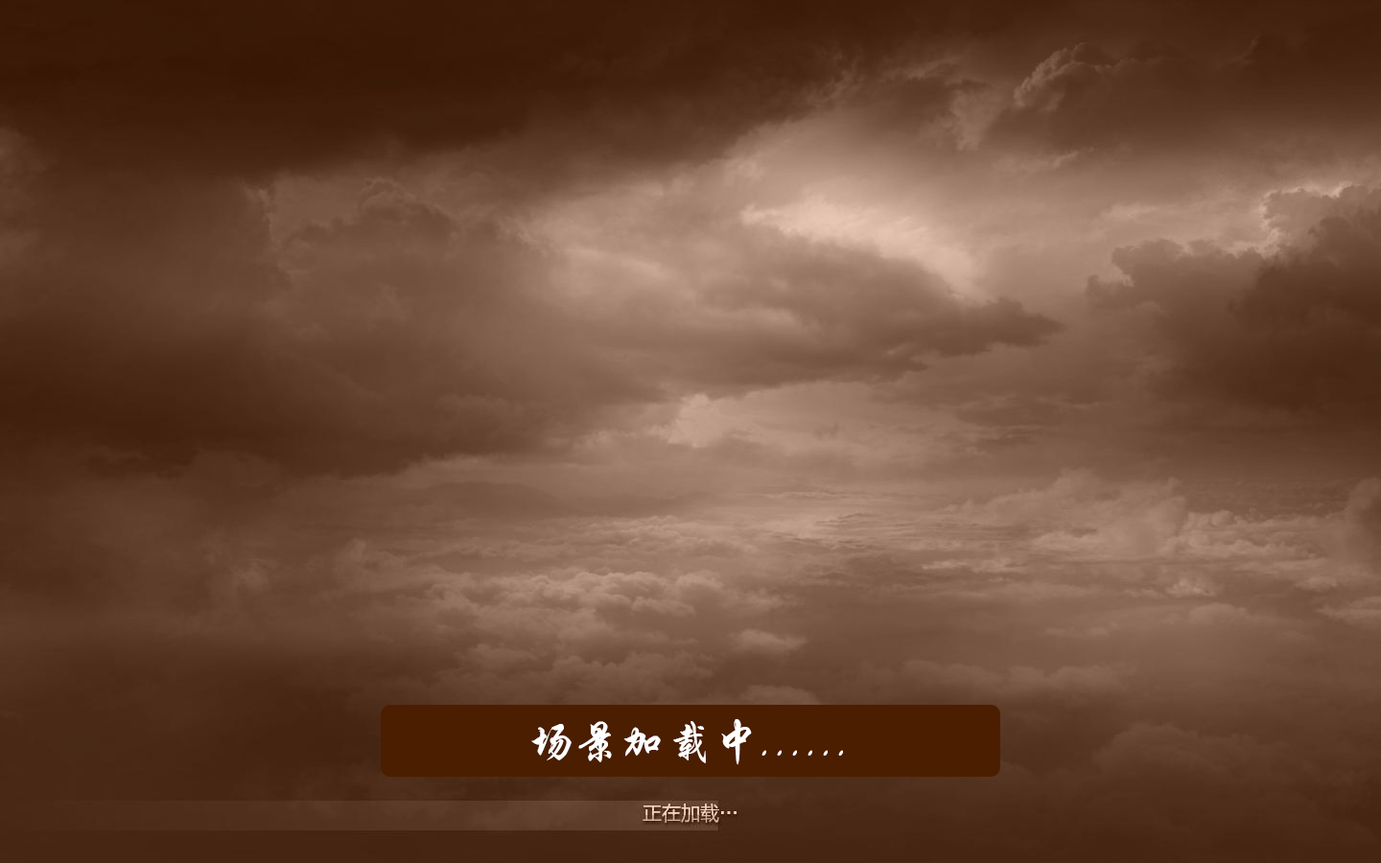
<style>
.page{position:relative;width:1381px;height:863px}
.page>*{position:absolute;margin:0}
.t1{font:46px "STXingkai";color:#ffffff}
</style>
<div class="page">
<p class="t1" style="left:531px;top:719px;width:312px;height:46px">场景加载中......</p>
</div>
